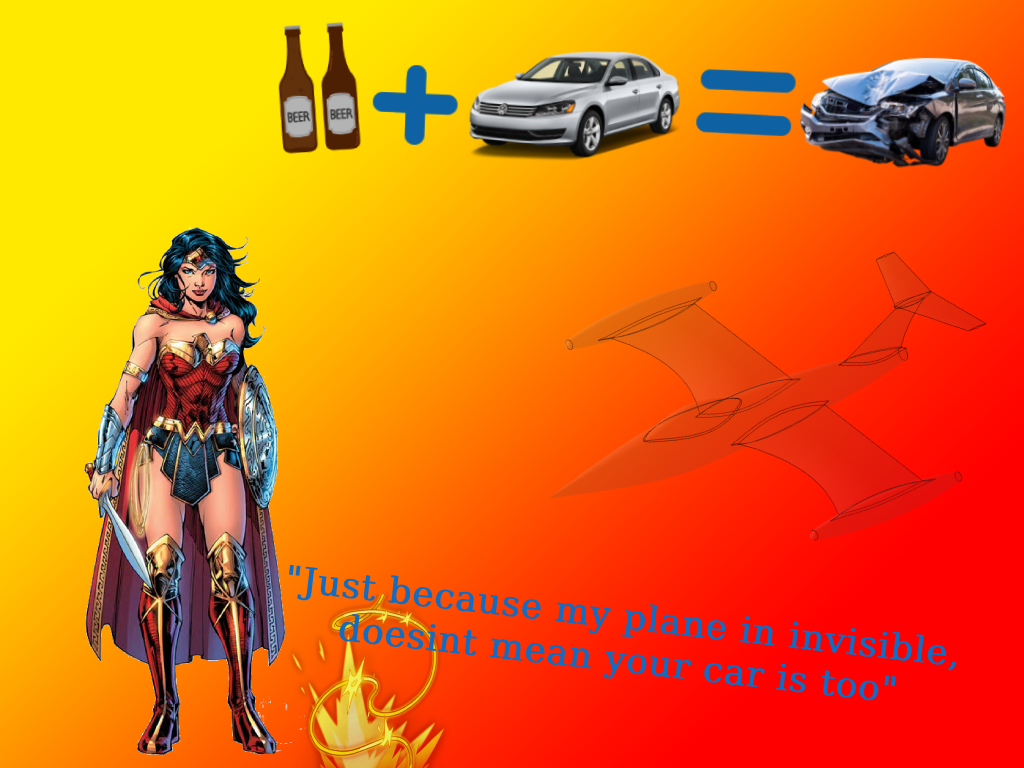
<style>
.page{position:relative;width:1024px;height:768px}
.page>*{position:absolute;margin:0}
.t1{font:35.9px "DejaVuSerif";color:#106dc3;font-weight:bold}
</style>
<div class="page">
<p class="t1" style="left:289px;top:564px;width:668px;height:137px;text-align:center;rotate:6deg">"Just because my plane in invisible,<br>doesint mean your car is too"</p>
</div>
